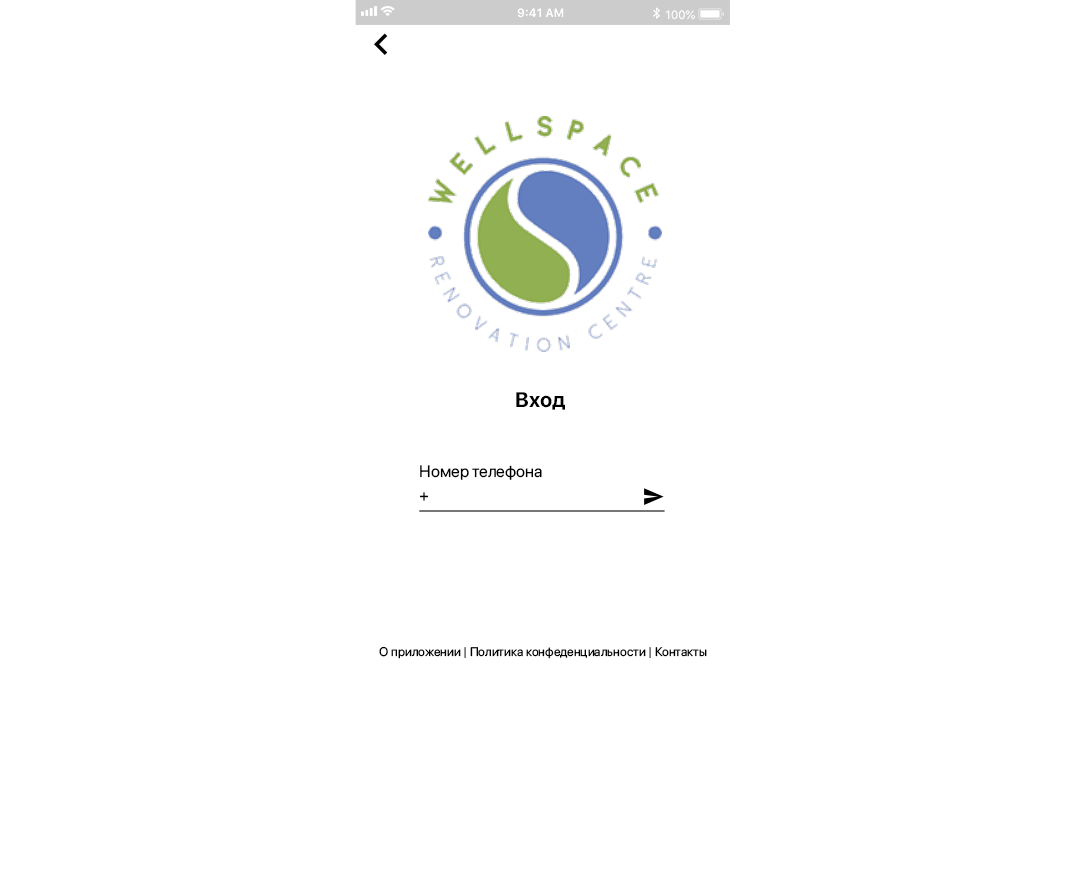
<style>
.page{position:relative;width:1080px;height:896px;background:#ffffff}
.page>*{position:absolute;margin:0}
.t1{font:21px "SFProDisplay-Bold";color:#000000}
.t2{font:16.5px "SFProDisplay-Regular";color:#000000}
.t3{font:12.5px "SFProDisplay-Regular";color:#000000}
</style>
<div class="page">
<p class="t1" style="left:516px;top:392px;width:49px;height:18px">Вход</p>
<p class="t2" style="left:420px;top:465px;width:122px;height:15px">Номер телефона</p>
<p class="t2" style="left:420px;top:492px;width:8px;height:9px">+</p>
<p class="t3" style="left:379px;top:646px;width:328px;height:13px">О приложении | Политика конфеденциальности | Контакты</p>
</div>
